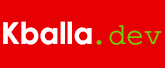
<style>
.page{position:relative;width:165px;height:68px;background:#e60003}
.page>*{position:absolute;margin:0}
.t1{font:30px "CenturyGothic-Bold";color:#fefefe}
.t2{font:30px "CourierNewPSMT";color:#68cf0d}
</style>
<div class="page">
<p class="t1" style="left:3px;top:21px;width:89px;height:24px">Kballa</p>
<p class="t2" style="left:96px;top:25px;width:66px;height:20px">.dev</p>
</div>
